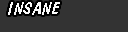
<style>
.page{position:relative;width:128px;height:32px;background:#333333}
.page>*{position:absolute;margin:0}
.t1{font:18px "DomDiagonalBT-Regular";letter-spacing:0.05em;color:#fbfbfb}
</style>
<div class="page">
<p class="t1" style="left:8px;top:2px;width:52px;height:13px">INSANE</p>
</div>
